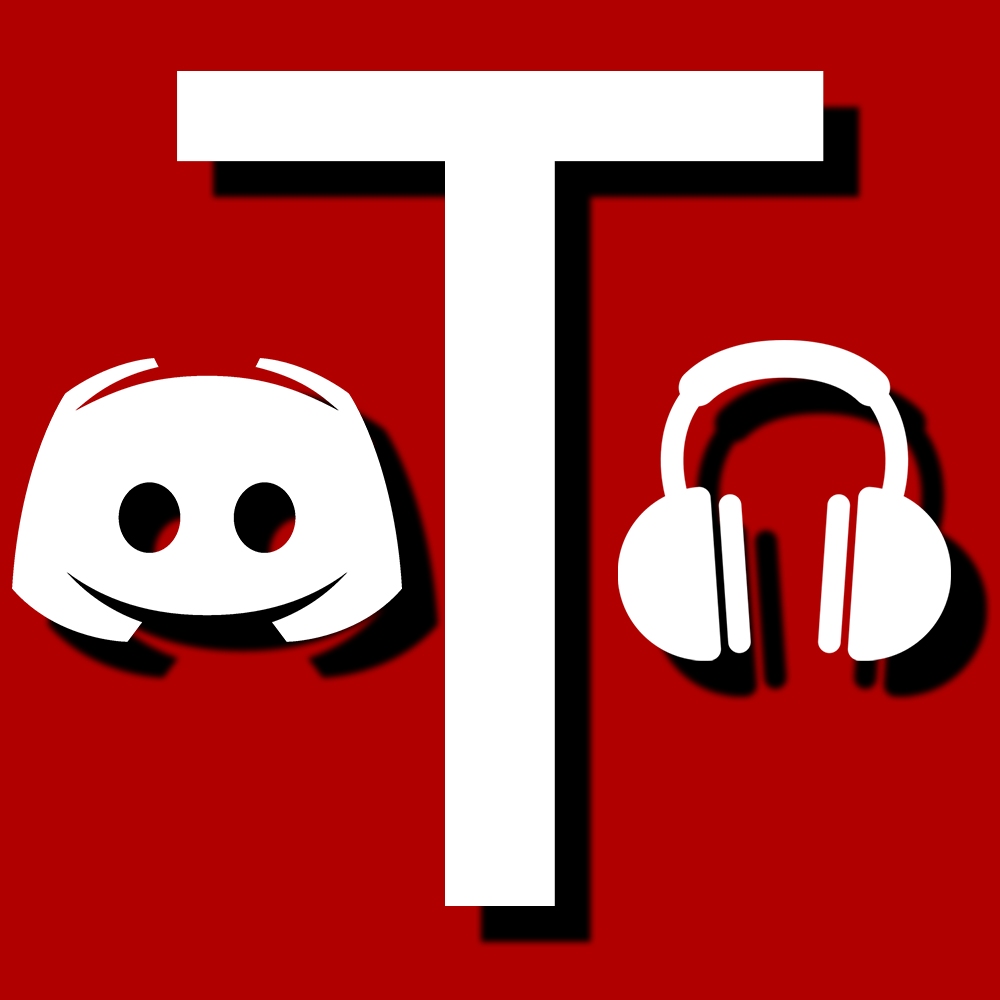
<style>
.page{position:relative;width:1000px;height:1000px;background:#b00000}
.page>*{position:absolute;margin:0}
.t1{font:1175px "Roboto-Regular";color:#ffffff}
</style>
<div class="page">
<p class="t1" style="left:177px;top:71px;width:647px;height:835px">T</p>
</div>
